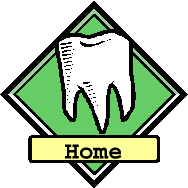
<style>
.page{position:relative;width:188px;height:188px;background:#ffffff}
.page>*{position:absolute;margin:0}
.t1{font:24px "Courier-Bold";color:#000000}
</style>
<div class="page">
<p class="t1" style="left:65px;top:144px;width:57px;height:15px">Home</p>
</div>
